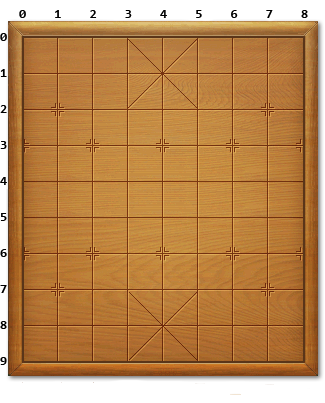
<style>
.page{position:relative;width:325px;height:403px}
.page>*{position:absolute;margin:0}
.t1{font:13.1px "Consolas-Bold";letter-spacing:-0.01em;color:#000000}
.t2{font:13.1px/18px "Consolas-Bold";color:#000000}
</style>
<div class="page">
<p class="t1" style="left:19px;top:10px;width:289px;height:8px">0    1    2    3    4    5    6    7    8</p>
<p class="t2" style="left:0px;top:33px;width:7px;height:332px">0<br><br>1<br><br>2<br><br>3<br><br>4<br><br>5<br><br>6<br><br>7<br><br>8<br><br>9</p>
</div>
